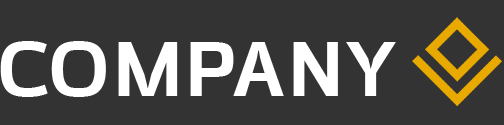
<style>
.page{position:relative;width:504px;height:125px;background:#333333}
.page>*{position:absolute;margin:0}
.t1{font:84.5px "AzoftSans-Bold";color:#ffffff}
</style>
<div class="page">
<p class="t1" style="left:0px;top:41px;width:396px;height:56px">COMPANY</p>
</div>
